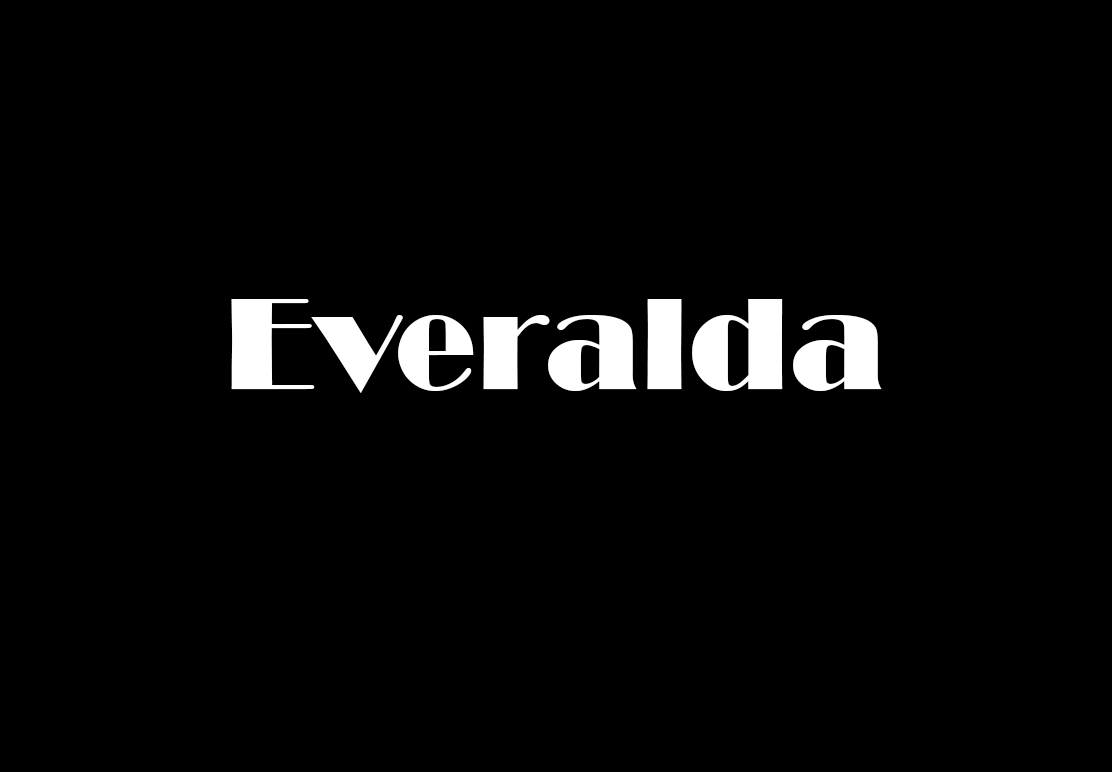
<style>
.page{position:relative;width:1112px;height:772px;background:#000000}
.page>*{position:absolute;margin:0}
.t1{font:135.4px "Broadway";color:#ffffff}
</style>
<div class="page">
<p class="t1" style="left:231px;top:299px;width:651px;height:94px">Everalda</p>
</div>
